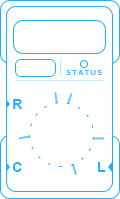
<style>
.page{position:relative;width:120px;height:199px;background:#ffffff}
.page>*{position:absolute;margin:0}
.t1{font:10px "Corbel-Bold";letter-spacing:0.1em;color:#52c0ff;font-variant:small-caps}
.t2{font:14px "Arial-BoldMT";letter-spacing:0.2em;color:#1eb0ff;text-transform:uppercase}
</style>
<div class="page">
<p class="t1" style="left:66px;top:70px;width:36px;height:5px">status</p>
<p class="t2" style="left:13px;top:99px;width:10px;height:10px">R</p>
<p class="t2" style="left:12px;top:162px;width:10px;height:10px">C</p>
<p class="t2" style="left:98px;top:162px;width:8px;height:10px">L</p>
</div>
